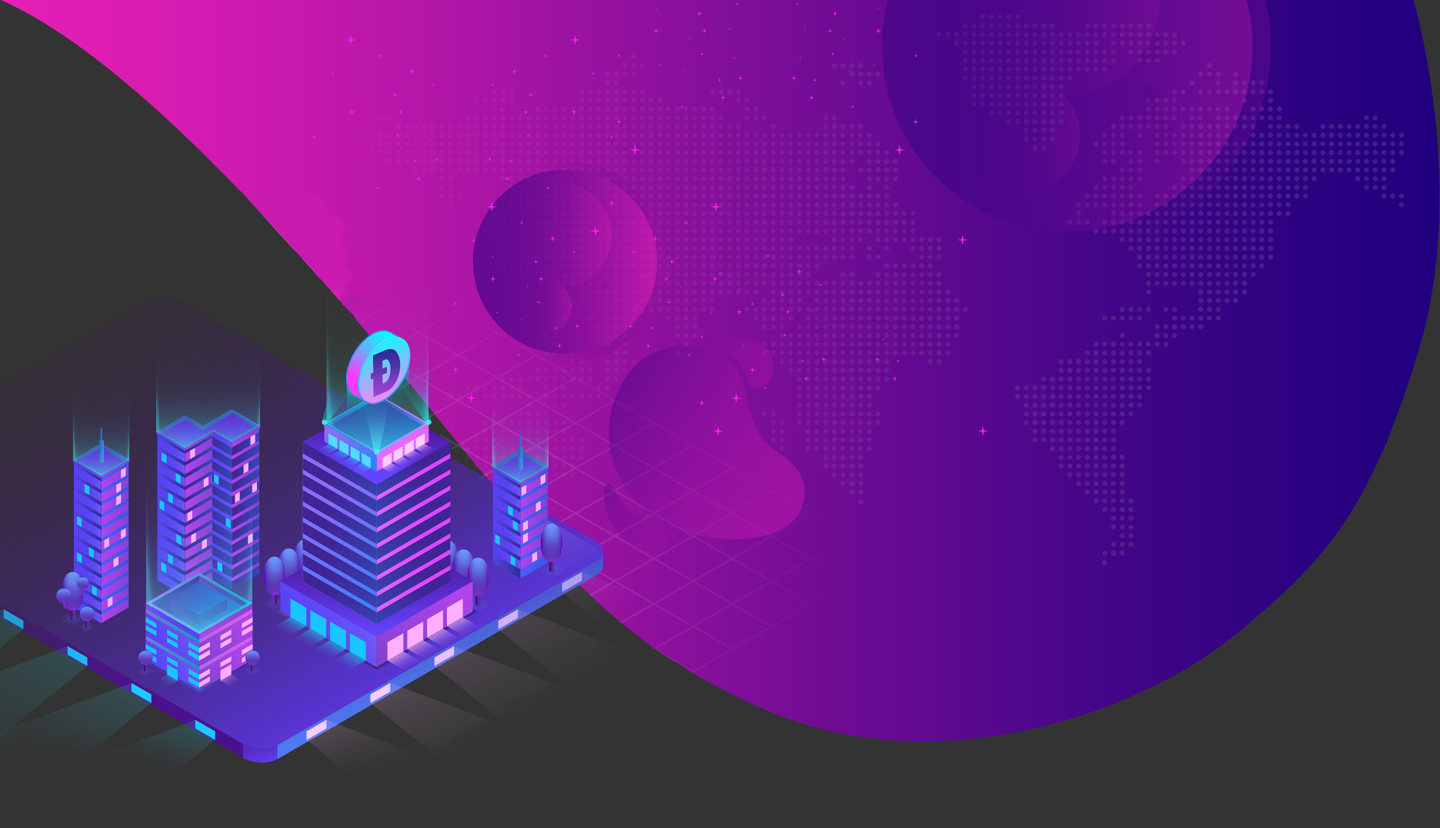
<style>
.page{position:relative;width:1440px;height:828px;background:#333333}
.page>*{position:absolute;margin:0}
.t1{font:62.6px "FranklinGothic-Heavy";letter-spacing:0.32em;scale:0.79 1}
</style>
<div class="page">
<p class="t1" style="left:371px;top:349px;width:30px;height:49px;rotate:-23deg">Ð</p>
</div>
